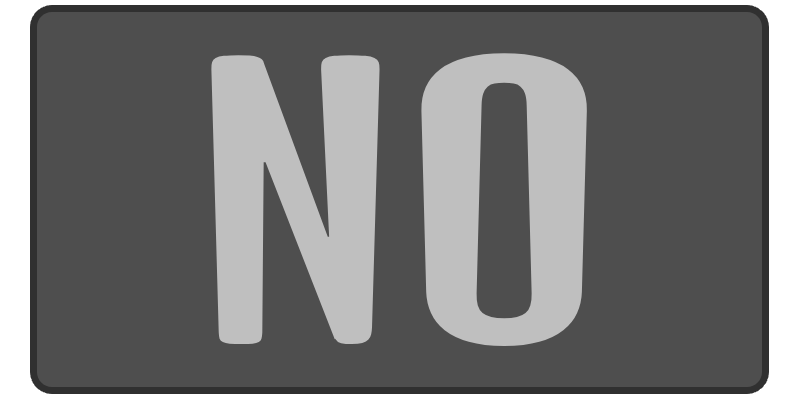
<style>
.page{position:relative;width:800px;height:400px;background:#4e4e4e}
.page>*{position:absolute;margin:0}
.t1{font:350px "DenkOne-Regular";color:#bfbfbf}
</style>
<div class="page">
<p class="t1" style="left:211px;top:53px;width:377px;height:294px">NO</p>
</div>
